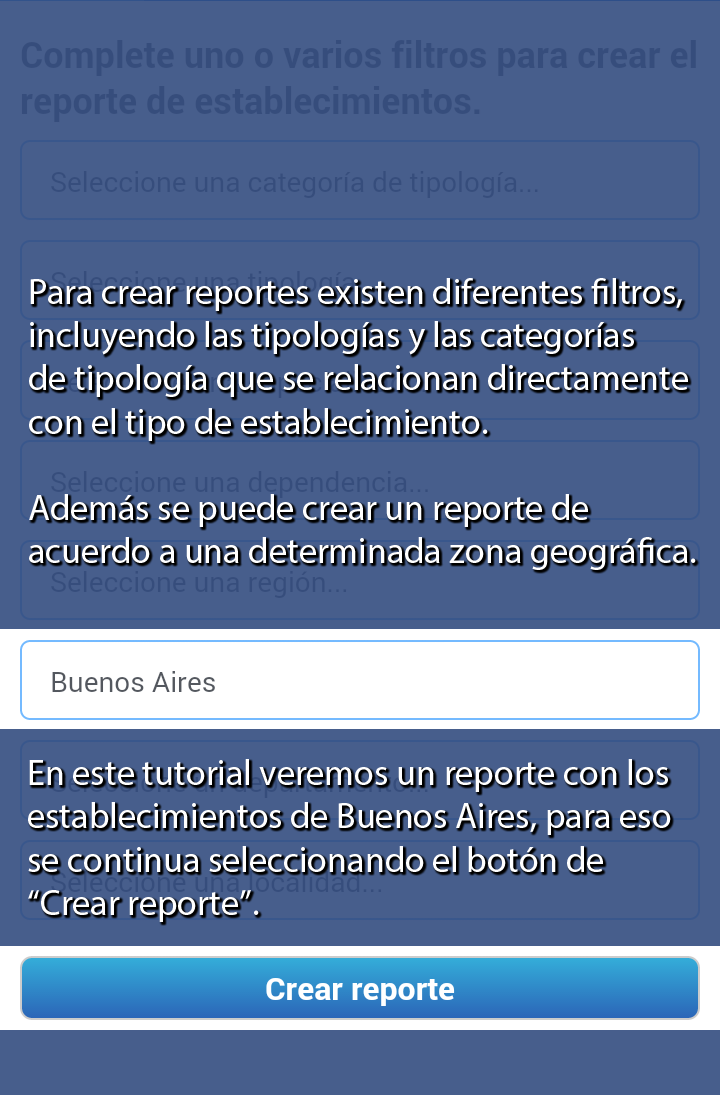
<style>
.page{position:relative;width:720px;height:1095px;background:#475e8c}
.page>*{position:absolute;margin:0}
.t1{font:36px "MyriadPro-Regular";color:#ffffff}
</style>
<div class="page">
<p class="t1" style="left:29px;top:278px;width:667px;height:292px">Para crear reportes existen diferentes filtros,<br>incluyendo las tipologías y las categorías<br>de tipología que se relacionan directamente<br>con el tipo de establecimiento.<br><br>Además se puede crear un reporte de<br>acuerdo a una determinada zona geográfica.</p>
<p class="t1" style="left:28px;top:759px;width:643px;height:163px">En este tutorial veremos un reporte con los<br>establecimientos de Buenos Aires, para eso<br>se continua seleccionando el botón de<br>“Crear reporte”.</p>
</div>
